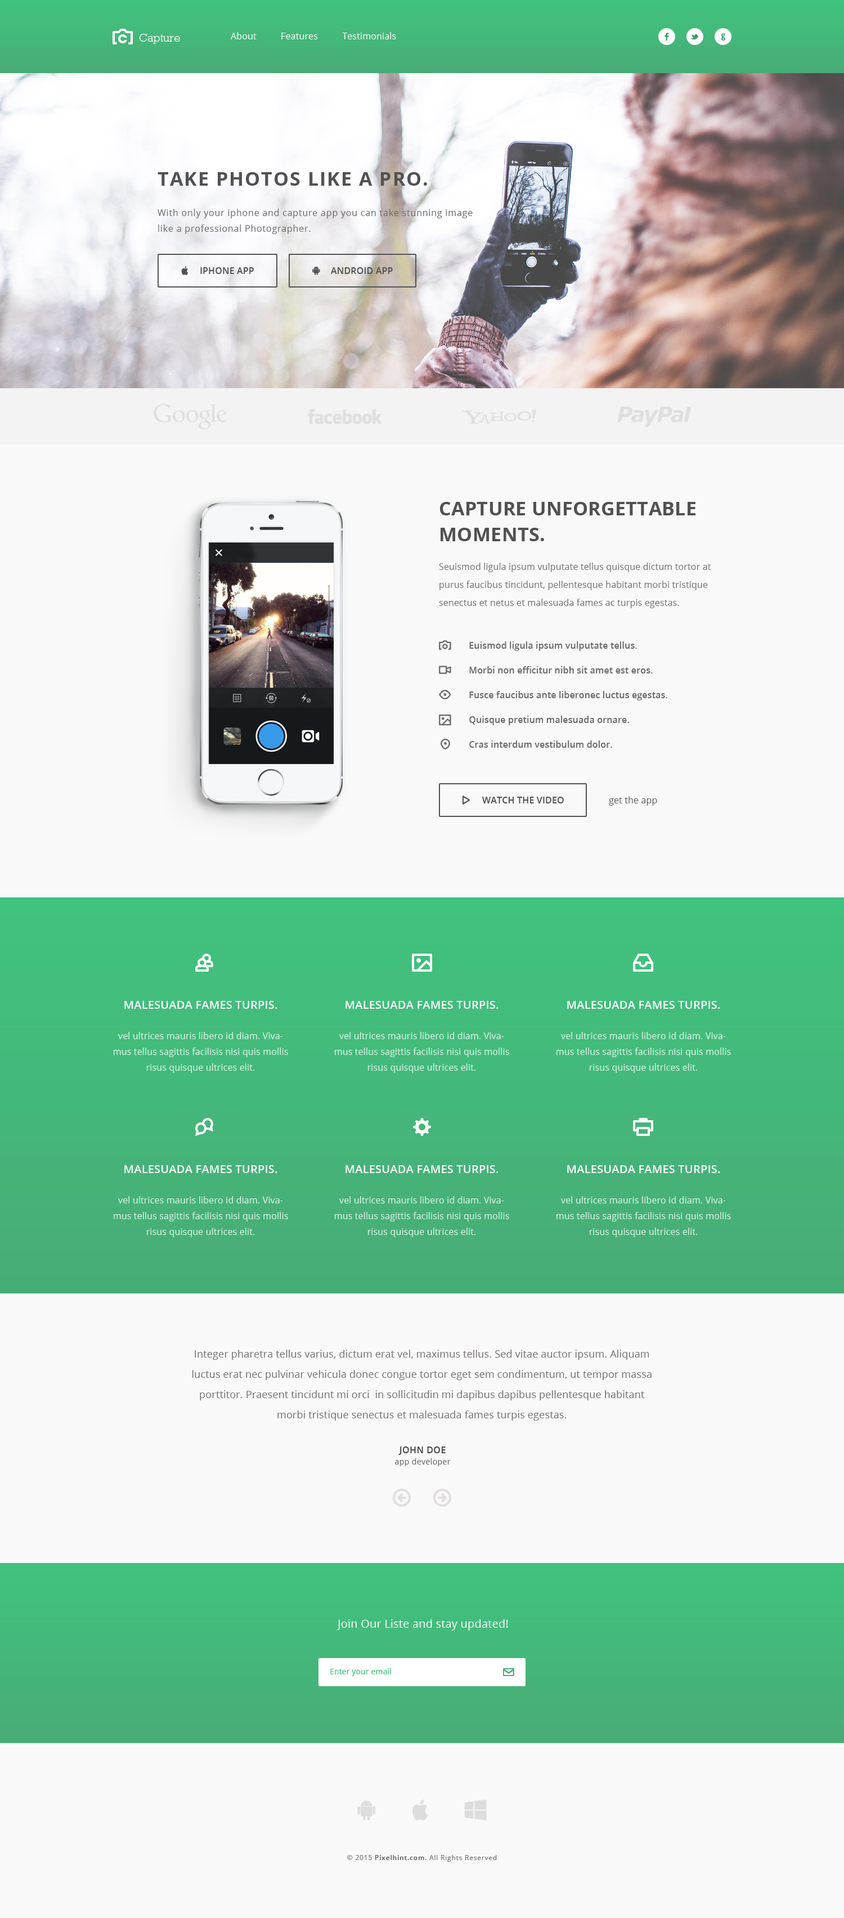
<style>
.page{position:relative;width:844px;height:1918px;background:#faf9f9}
.page>*{position:absolute;margin:0}
.t1{font:11.2px "RockwellStd-Light";letter-spacing:0.01em;color:#ffffff}
.t2{font:9px "OpenSans";letter-spacing:0.01em;color:#ffffff}
.t3{font:12.4px "Socialico";letter-spacing:0.01em;color:#3b9e69}
.t4{font:19.1px "OpenSans-Bold";letter-spacing:0.06em;color:#525252;text-transform:uppercase}
.t5{font:9px/15.8px "OpenSans";letter-spacing:0.05em;color:#6e6c6c}
.t6{font:9px "OpenSans-Semibold";letter-spacing:0.01em;color:#525252;text-transform:uppercase}
.t7{font:9px/24.8px "OpenSans-Semibold";letter-spacing:0.01em;color:#6d6c6c}
.t8{font:19.1px/25.9px "OpenSans-Bold";letter-spacing:0.01em;color:#525151;text-transform:uppercase}
.t9{font:9px/18px "OpenSans";letter-spacing:0.01em;color:#767272}
.t10{font:9px "OpenSans";letter-spacing:0.01em;color:#636363}
.t11{font:9px/15.8px "OpenSans";letter-spacing:0.01em;color:#e1f7eb}
.t12{font:11.2px/14.6px "OpenSans-Semibold";letter-spacing:0.01em;color:#ffffff;text-transform:uppercase}
.t13{font:10.1px/20.2px "OpenSans";letter-spacing:0.01em;color:#767272}
.t14{font:7.9px/11.2px "OpenSans";letter-spacing:0.03em;color:#6f6d6d}
.t15{font:9px/11.2px "OpenSans-Semibold";letter-spacing:0.03em;color:#4b4848;text-transform:uppercase}
.t16{font:11.2px "OpenSans";letter-spacing:0.01em;color:#ffffff}
.t17{font:7.9px "OpenSans";letter-spacing:0.01em;color:#41c17d}
.t18{font:6.8px "OpenSans";letter-spacing:0.066em;color:#767272}
.t19{font:6.8px "OpenSans-Semibold";letter-spacing:0.066em;color:#565555}
</style>
<div class="page">
<p class="t1" style="left:140px;top:34px;width:40px;height:10px">Capture</p>
<p class="t2" style="left:231px;top:32px;width:165px;height:7px">About          Features          Testimonials</p>
<p class="t3" style="left:664px;top:33px;width:5px;height:7px">F</p>
<p class="t3" style="left:690px;top:34px;width:9px;height:6px">L</p>
<p class="t3" style="left:721px;top:33px;width:4px;height:7px">G</p>
<p class="t4" style="left:158px;top:172px;width:269px;height:14px">Take Photos Like A Pro.</p>
<p class="t5" style="left:158px;top:209px;width:314px;height:25px">With only your iphone and capture app you can take stunning image <br>like a professional Photographer.</p>
<p class="t6" style="left:200px;top:267px;width:54px;height:7px">Iphone APP</p>
<p class="t6" style="left:331px;top:267px;width:62px;height:7px">Android APP</p>
<p class="t7" style="left:439px;top:502px;width:272px;height:246px"><span class="t8">Capture unforgettable moments.<br><br></span><span class="t9">Seuismod ligula ipsum vulputate tellus quisque dictum tortor at purus faucibus tincidunt, pellentesque habitant morbi tristique senectus et netus et malesuada fames ac turpis egestas. <br><br></span>     Euismod ligula ipsum vulputate tellus.<br>     Morbi non efficitur nibh sit amet est eros. <br>         Fusce faucibus ante liberonec luctus egestas.<br>     Quisque pretium malesuada ornare. <br>     Cras interdum vestibulum dolor.</p>
<p class="t6" style="left:482px;top:796px;width:82px;height:7px">Watch the Video</p>
<p class="t10" style="left:609px;top:796px;width:48px;height:10px">get the app</p>
<p class="t11" style="left:114px;top:1001px;width:174px;height:72px;text-align:center"><span class="t12">malesuada fames turpis.<br><br></span>vel ultrices mauris libero id diam. Vivamus tellus sagittis facilisis nisi quis mollis risus quisque ultrices elit.</p>
<p class="t11" style="left:335px;top:1001px;width:174px;height:72px;text-align:center"><span class="t12">malesuada fames turpis.<br><br></span>vel ultrices mauris libero id diam. Vivamus tellus sagittis facilisis nisi quis mollis risus quisque ultrices elit.</p>
<p class="t11" style="left:556px;top:1001px;width:175px;height:72px;text-align:center"><span class="t12">malesuada fames turpis.<br><br></span>vel ultrices mauris libero id diam. Vivamus tellus sagittis facilisis nisi quis mollis risus quisque ultrices elit.</p>
<p class="t11" style="left:114px;top:1165px;width:174px;height:72px;text-align:center"><span class="t12">malesuada fames turpis.<br><br></span>vel ultrices mauris libero id diam. Vivamus tellus sagittis facilisis nisi quis mollis risus quisque ultrices elit.</p>
<p class="t11" style="left:335px;top:1165px;width:174px;height:72px;text-align:center"><span class="t12">malesuada fames turpis.<br><br></span>vel ultrices mauris libero id diam. Vivamus tellus sagittis facilisis nisi quis mollis risus quisque ultrices elit.</p>
<p class="t11" style="left:556px;top:1165px;width:175px;height:72px;text-align:center"><span class="t12">malesuada fames turpis.<br><br></span>vel ultrices mauris libero id diam. Vivamus tellus sagittis facilisis nisi quis mollis risus quisque ultrices elit.</p>
<p class="t13" style="left:192px;top:1349px;width:459px;height:71px;text-align:center">Integer pharetra tellus varius, dictum erat vel, maximus tellus. Sed vitae auctor ipsum. Aliquam luctus erat nec pulvinar vehicula donec congue tortor eget sem condimentum, ut tempor massa porttitor. Praesent tincidunt mi orci  in sollicitudin mi dapibus dapibus pellentesque habitant morbi tristique senectus et malesuada fames turpis egestas.</p>
<p class="t14" style="left:395px;top:1446px;width:56px;height:20px;text-align:center"><span class="t15">John Doe<br></span>app developer</p>
<p class="t16" style="left:336px;top:1619px;width:172px;height:11px">Join Our Liste and stay updated!</p>
<p class="t17" style="left:330px;top:1668px;width:61px;height:8px">Enter your email</p>
<p class="t18" style="left:347px;top:1855px;width:150px;height:6px">© 2015 <span class="t19">Pixelhint.com</span>. All Rights Reserved</p>
</div>
